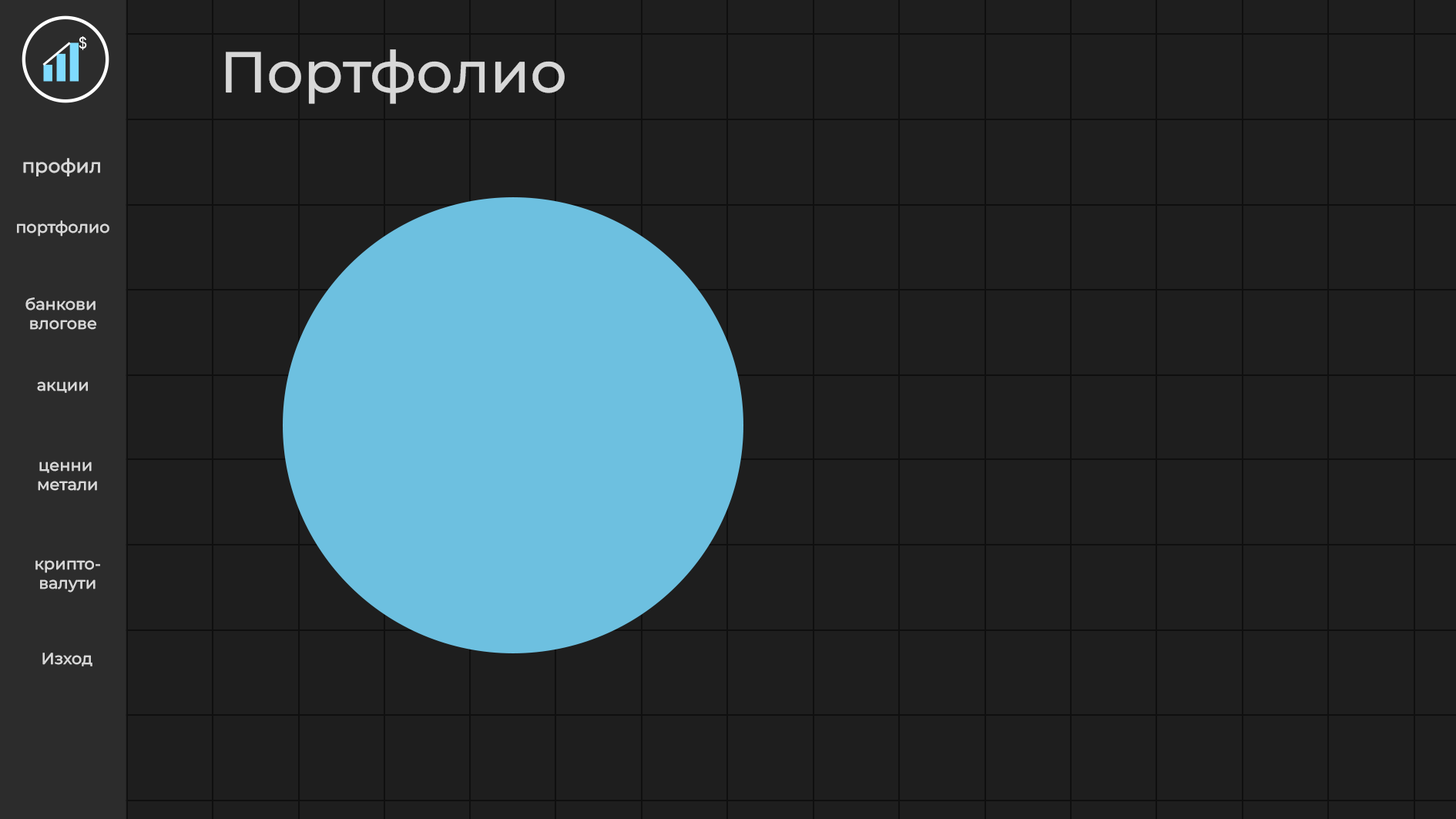
<style>
.page{position:relative;width:1456px;height:819px;background:#1e1e1e}
.page>*{position:absolute;margin:0}
.t1{font:57.8px "MontserratRoman-Medium";color:#d7d7d7}
.t2{font:19.3px "MontserratRoman-Medium";color:#d7d7d7}
.t3{font:16.1px "MontserratRoman-Medium";color:#d7d7d7}
</style>
<div class="page">
<p class="t1" style="left:226px;top:49px;width:339px;height:55px">Портфолио</p>
<p class="t2" style="left:23px;top:158px;width:77px;height:18px">профил</p>
<p class="t3" style="left:17px;top:220px;width:92px;height:17px">портфолио</p>
<p class="t3" style="left:25px;top:297px;width:72px;height:33px;text-align:center">банкови <br>влогове</p>
<p class="t3" style="left:37px;top:381px;width:51px;height:12px">акции</p>
<p class="t3" style="left:38px;top:461px;width:59px;height:30px;text-align:center">ценни <br>метали</p>
<p class="t3" style="left:35px;top:560px;width:65px;height:32px;text-align:center">крипто-<br>валути</p>
<p class="t3" style="left:42px;top:653px;width:50px;height:13px">Изход</p>
</div>
